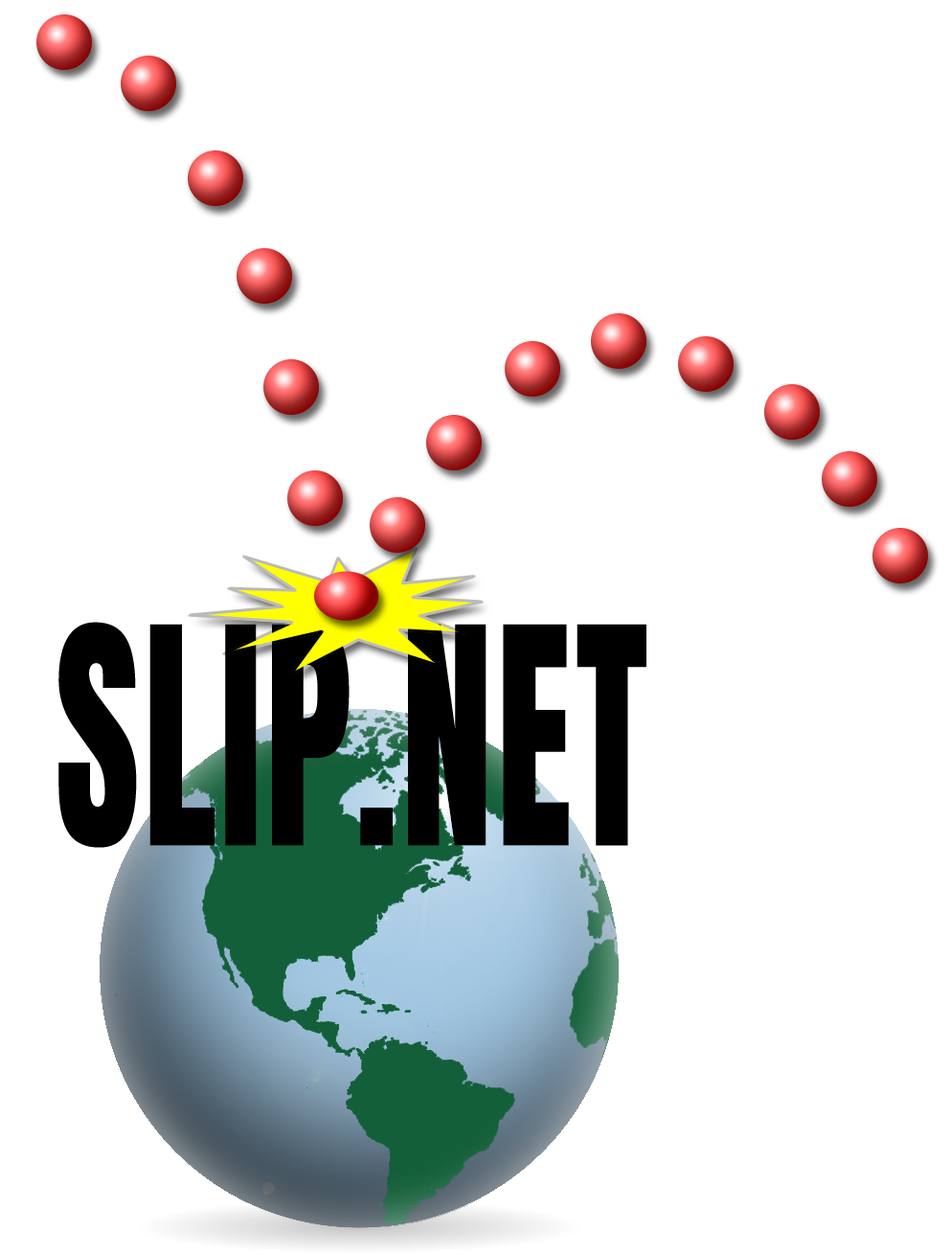
<style>
.page{position:relative;width:950px;height:1255px;background:#ffffff}
.page>*{position:absolute;margin:0}
.t1{font:257px "Anton-Regular";letter-spacing:0.02em;color:#000000;scale:0.71 1}
</style>
<div class="page">
<p class="t1" style="left:58px;top:622px;width:589px;height:226px">SLIP.NET</p>
</div>
